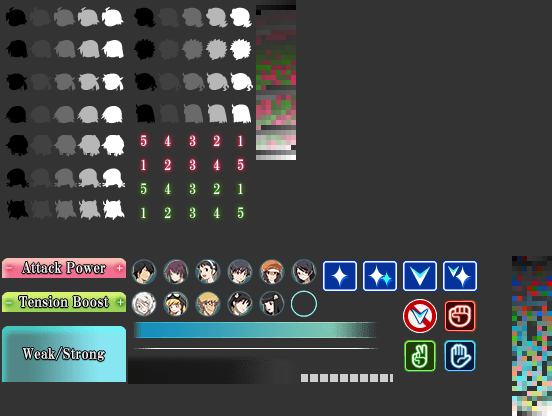
<style>
.page{position:relative;width:552px;height:416px;background:#333333}
.page>*{position:absolute;margin:0}
.t1{font:14px/34px "HGPMinchoE";letter-spacing:0.01em;color:#ffffff}
.t2{font:14px/52px "HGPMinchoE";letter-spacing:0.01em;color:#ffffff}
</style>
<div class="page">
<p class="t1" style="left:19px;top:262px;width:90px;height:99px;text-align:center">Attack Power<br>Tension Boost<br><span class="t2">Weak/Strong</span></p>
</div>
